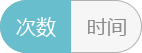
<style>
.page{position:relative;width:142px;height:53px;background:#69becd}
.page>*{position:absolute;margin:0}
.t1{font:20px "MicrosoftYaHei";color:#ffffff}
.t2{font:20px "MicrosoftYaHei";color:#8c8c8c}
</style>
<div class="page">
<p class="t1" style="left:16px;top:17px;width:40px;height:20px">次数</p>
<p class="t2" style="left:88px;top:18px;width:38px;height:18px">时间</p>
</div>
